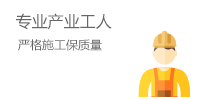
<style>
.page{position:relative;width:205px;height:100px;background:#ffffff}
.page>*{position:absolute;margin:0}
.t1{font:16px "MicrosoftYaHei";color:#666666}
.t2{font:11.7px "MicrosoftYaHei";color:#666666}
</style>
<div class="page">
<p class="t1" style="left:16px;top:13px;width:96px;height:17px">专业产业工人</p>
<p class="t2" style="left:18px;top:39px;width:84px;height:12px">严格施工保质量</p>
</div>
